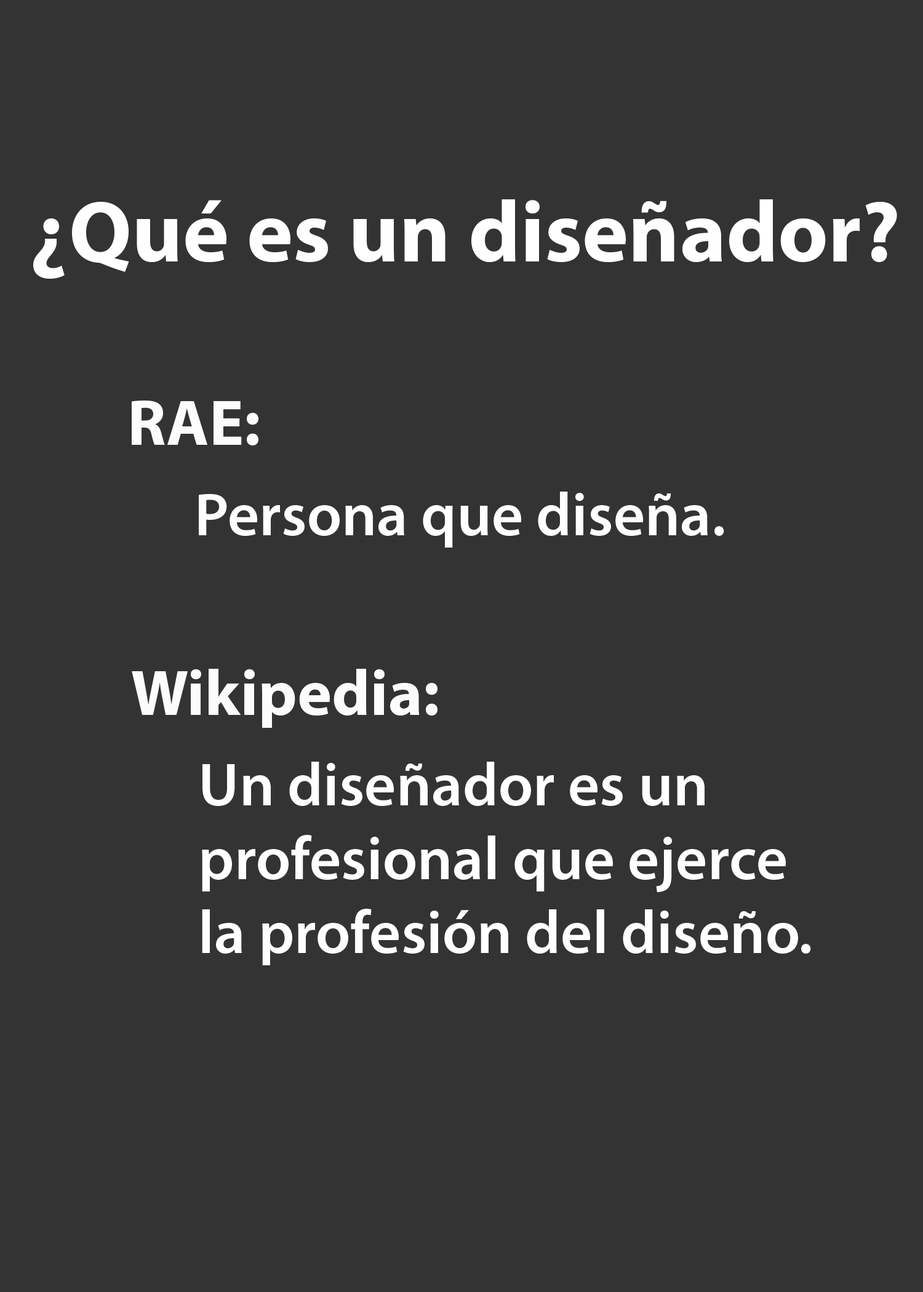
<style>
.page{position:relative;width:923px;height:1292px;background:#333333}
.page>*{position:absolute;margin:0}
.t1{font:87.4px "MyriadPro-Bold";color:#ffffff}
.t2{font:65px "MyriadPro-Bold";color:#fcfcfc}
.t3{font:61.5px "MyriadPro-Semibold";color:#ffffff}
</style>
<div class="page">
<p class="t1" style="left:33px;top:199px;width:864px;height:80px">¿Qué es un diseñador?</p>
<p class="t2" style="left:132px;top:401px;width:126px;height:44px">RAE:</p>
<p class="t3" style="left:199px;top:492px;width:525px;height:56px">Persona que diseña.</p>
<p class="t2" style="left:132px;top:669px;width:305px;height:59px">Wikipedia:</p>
<p class="t3" style="left:202px;top:762px;width:609px;height:203px">Un diseñador es un <br>profesional que ejerce<br>la profesión del diseño.</p>
</div>
